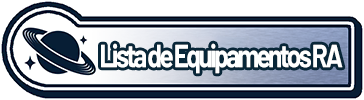
<style>
.page{position:relative;width:364px;height:100px;background:#ffffff}
.page>*{position:absolute;margin:0}
.t1{font:32px "Barlow-Bold";letter-spacing:-0.1em;color:#ffffff;scale:0.81 1}
</style>
<div class="page">
<p class="t1" style="left:101px;top:43px;width:242px;height:31px">Lista de Equipamentos RA</p>
</div>
